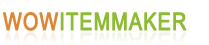
<style>
.page{position:relative;width:209px;height:45px;background:#ffffff}
.page>*{position:absolute;margin:0}
.t1{font:24px "ArialNarrow";letter-spacing:0.025em;color:#8ebb34;text-transform:uppercase;font-weight:bold}
.t2{font:24px "ArialNarrow";letter-spacing:0.025em;color:#dd8732;text-transform:uppercase;font-weight:bold}
</style>
<div class="page">
<p class="t1" style="left:3px;top:12px;width:184px;height:19px"><span class="t2">WOW</span>ITEMMAKER</p>
</div>
